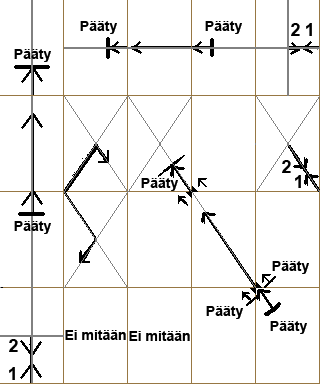
<style>
.page{position:relative;width:320px;height:384px;background:#ffffff}
.page>*{position:absolute;margin:0}
.t1{font:14px "Arial-BoldMT";color:#000000}
</style>
<div class="page">
<p class="t1" style="left:80px;top:21px;width:37px;height:13px">Pääty</p>
<p class="t1" style="left:205px;top:21px;width:37px;height:13px">Pääty</p>
<p class="t1" style="left:14px;top:49px;width:37px;height:13px">Pääty</p>
<p class="t1" style="left:141px;top:178px;width:37px;height:13px">Pääty</p>
<p class="t1" style="left:14px;top:221px;width:37px;height:13px">Pääty</p>
<p class="t1" style="left:272px;top:261px;width:37px;height:13px">Pääty</p>
<p class="t1" style="left:206px;top:306px;width:37px;height:13px">Pääty</p>
<p class="t1" style="left:270px;top:321px;width:37px;height:13px">Pääty</p>
<p class="t1" style="left:65px;top:330px;width:61px;height:10px">Ei mitään</p>
<p class="t1" style="left:129px;top:331px;width:61px;height:10px">Ei mitään</p>
</div>
